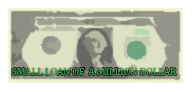
<style>
.page{position:relative;width:192px;height:92px;background:#ffffff}
.page>*{position:absolute;margin:0}
.t1{font:8.9px "Merriweather-Regular";color:#389a5f}
</style>
<div class="page">
<p class="t1" style="left:11px;top:68px;width:166px;height:7px">SMALL LOAN OF  A MILLION DOLLAR</p>
</div>
